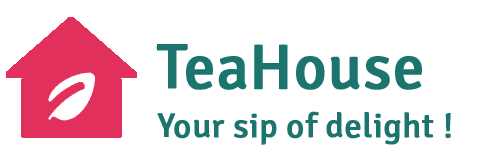
<style>
.page{position:relative;width:489px;height:164px;background:#ffffff}
.page>*{position:absolute;margin:0}
.t1{font:63.7px "Signika-Regular";color:#1b746d;font-weight:bold}
.t2{font:34px "Signika-Regular";color:#1b746d;font-weight:bold}
</style>
<div class="page">
<p class="t1" style="left:156px;top:44px;width:266px;height:46px">TeaHouse</p>
<p class="t2" style="left:157px;top:111px;width:294px;height:34px">! Your sip of delight</p>
</div>
